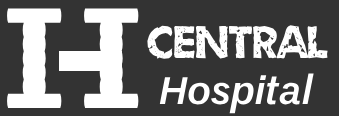
<style>
.page{position:relative;width:339px;height:116px;background:#333333}
.page>*{position:absolute;margin:0}
.t1{font:177.6px "VT323-Regular";color:#ffffff;scale:1.47 1}
.t2{font:51px "Umbrage";color:#ffffff}
.t3{font:39px "UnBPro-BoldItalic";color:#ffffff}
</style>
<div class="page">
<p class="t1" style="left:7px;top:8px;width:55px;height:100px">I</p>
<p class="t1" style="left:84px;top:8px;width:55px;height:100px">I</p>
<p class="t2" style="left:147px;top:25px;width:181px;height:34px">central</p>
<p class="t3" style="left:159px;top:73px;width:155px;height:41px">Hospital</p>
</div>
